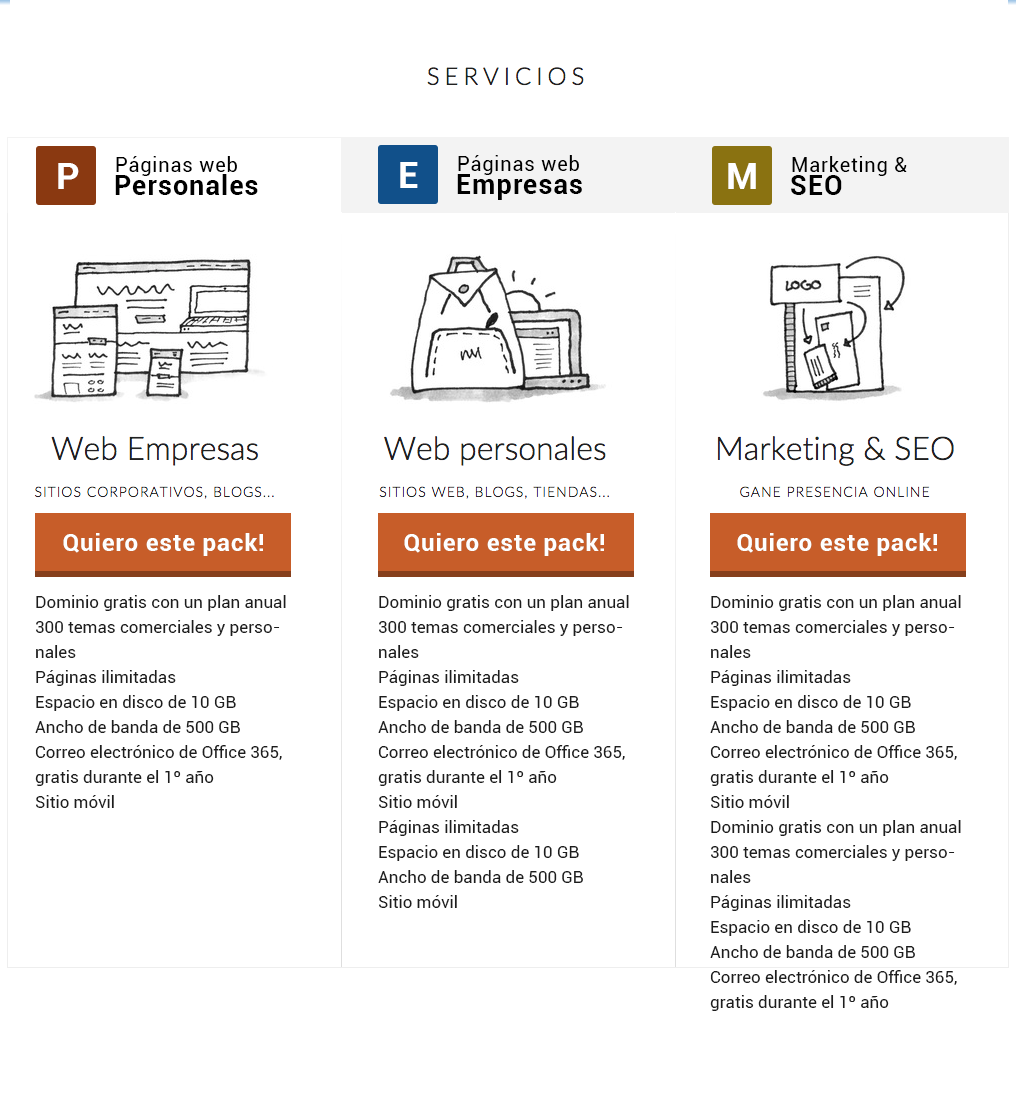
<style>
.page{position:relative;width:1016px;height:1101px;background:#ffffff}
.page>*{position:absolute;margin:0}
.t1{font:20px "Roboto-Regular";letter-spacing:0.04em;color:#000000}
.t2{font:37px "Roboto-Bold";letter-spacing:0.04em;color:#ffffff}
.t3{font:27px "Roboto-Bold";letter-spacing:0.04em;color:#000000}
.t4{font:17px/25px "Roboto-Regular";color:#1d1d1d}
</style>
<div class="page">
<p class="t1" style="left:116px;top:156px;width:121px;height:20px">Páginas web</p>
<p class="t1" style="left:458px;top:155px;width:121px;height:20px">Páginas web</p>
<p class="t1" style="left:792px;top:156px;width:115px;height:20px">Marketing &amp;</p>
<p class="t2" style="left:58px;top:163px;width:21px;height:26px">P</p>
<p class="t3" style="left:115px;top:174px;width:143px;height:21px">Personales</p>
<p class="t2" style="left:400px;top:162px;width:18px;height:26px">E</p>
<p class="t3" style="left:457px;top:174px;width:125px;height:26px">Empresas</p>
<p class="t2" style="left:728px;top:163px;width:28px;height:26px">M</p>
<p class="t3" style="left:791px;top:175px;width:51px;height:20px">SEO</p>
<p class="t4" style="left:35px;top:595px;width:251px;height:213px">Dominio gratis con un plan anual <br>300 temas comerciales y personales<br>Páginas ilimitadas<br>Espacio en disco de 10 GB<br>Ancho de banda de 500 GB<br>Correo electrónico de Office 365, gratis durante el 1º año <br>Sitio móvil</p>
<p class="t4" style="left:378px;top:595px;width:251px;height:313px">Dominio gratis con un plan anual <br>300 temas comerciales y personales<br>Páginas ilimitadas<br>Espacio en disco de 10 GB<br>Ancho de banda de 500 GB<br>Correo electrónico de Office 365, gratis durante el 1º año <br>Sitio móvil <br>Páginas ilimitadas<br>Espacio en disco de 10 GB<br>Ancho de banda de 500 GB <br>Sitio móvil</p>
<p class="t4" style="left:710px;top:595px;width:251px;height:416px">Dominio gratis con un plan anual <br>300 temas comerciales y personales<br>Páginas ilimitadas<br>Espacio en disco de 10 GB<br>Ancho de banda de 500 GB<br>Correo electrónico de Office 365, gratis durante el 1º año <br>Sitio móvil <br>Dominio gratis con un plan anual <br>300 temas comerciales y personales<br>Páginas ilimitadas<br>Espacio en disco de 10 GB<br>Ancho de banda de 500 GB<br>Correo electrónico de Office 365, gratis durante el 1º año <br>Sitio móvil</p>
</div>
